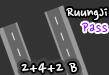
<style>
.page{position:relative;width:109px;height:75px;background:#333333}
.page>*{position:absolute;margin:0}
.t1{font:16px "NanumPen";color:#ffffff}
.t2{font:16px "NanumPen";letter-spacing:0.05em;color:#9900ff}
.t3{font:18px "NanumPen";letter-spacing:0.05em;color:#ffffff}
</style>
<div class="page">
<p class="t1" style="left:66px;top:8px;width:42px;height:12px">RuungJi</p>
<p class="t2" style="left:81px;top:22px;width:27px;height:10px">Pass</p>
<p class="t3" style="left:21px;top:62px;width:56px;height:11px">2+4+2 B</p>
</div>
